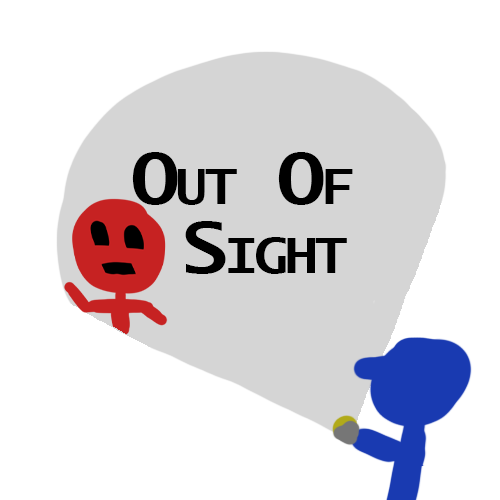
<style>
.page{position:relative;width:500px;height:500px;background:#ffffff}
.page>*{position:absolute;margin:0}
.t1{font:69.6px/69px "LucidaSans-TypewriterBold";letter-spacing:-0.04em;color:#000000;font-variant:small-caps;scale:1.1 1}
</style>
<div class="page">
<p class="t1" style="left:132px;top:152px;width:221px;height:122px;text-align:center">Out Of <br>Sight</p>
</div>
